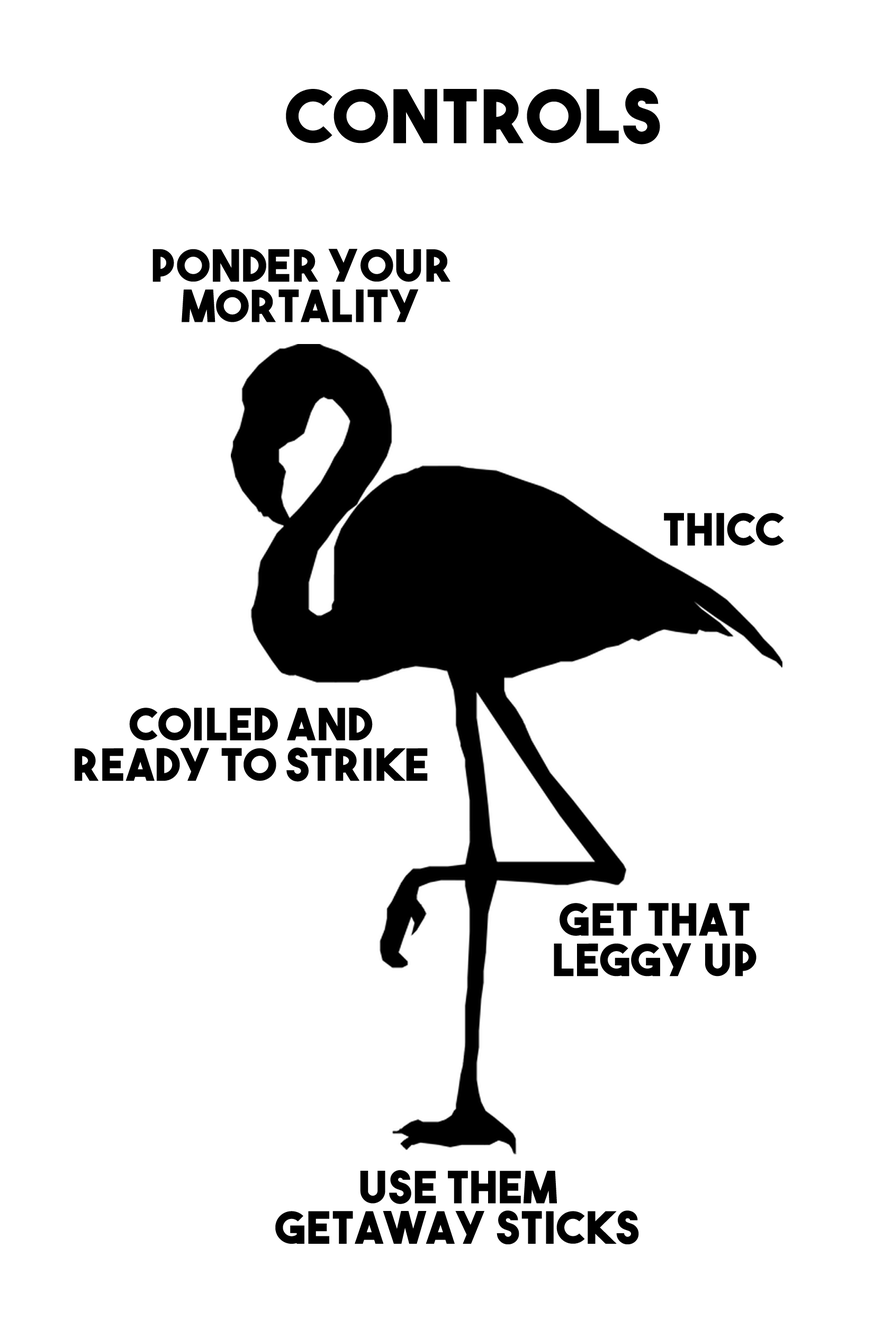
<style>
.page{position:relative;width:892px;height:1338px;background:#ffffff}
.page>*{position:absolute;margin:0}
.t1{font:73.5px "TheBoldFont";letter-spacing:0.025em;color:#000000}
.t2{font:44.1px/40.4px "TheBoldFont";letter-spacing:0.025em;color:#000000}
.t3{font:44.1px "TheBoldFont";letter-spacing:0.025em;color:#000000}
</style>
<div class="page">
<p class="t1" style="left:286px;top:88px;width:374px;height:56px">CONTROLS</p>
<p class="t2" style="left:152px;top:249px;width:298px;height:73px;text-align:center">PONDER YOUR<br>MORTALITY</p>
<p class="t3" style="left:663px;top:513px;width:121px;height:32px">THICC</p>
<p class="t2" style="left:75px;top:707px;width:353px;height:74px;text-align:center">COILED AND<br>READY TO STRIKE</p>
<p class="t2" style="left:553px;top:903px;width:203px;height:73px;text-align:center">GET THAT<br>LEGGY UP</p>
<p class="t2" style="left:275px;top:1169px;width:364px;height:75px;text-align:center">USE THEM<br>GETAWAY STICKS</p>
</div>
